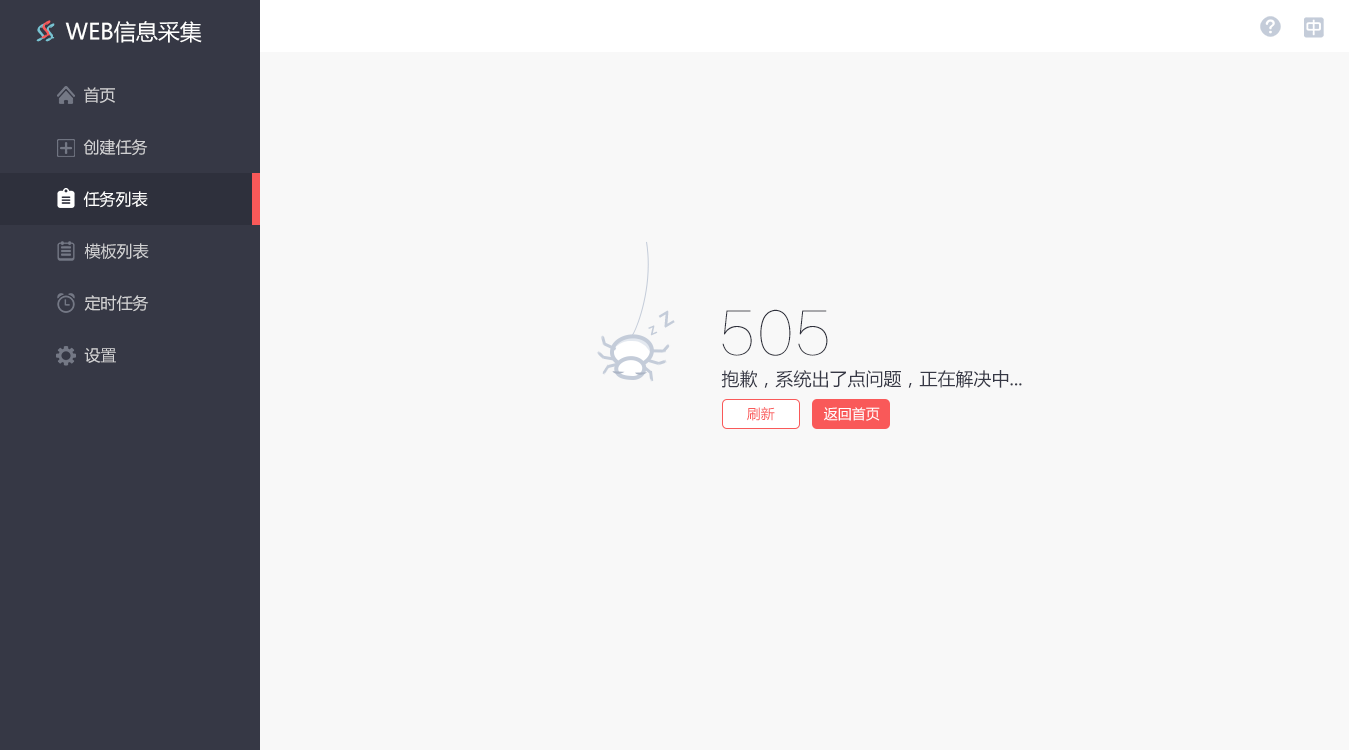
<style>
.page{position:relative;width:1349px;height:750px;background:#f8f8f8}
.page>*{position:absolute;margin:0}
.t1{font:24px "Mistral";color:#78c3d2}
.t2{font:24px "Mistral";color:#f95959}
.t3{font:22px "MicrosoftYaHei";color:#ffffff}
.t4{font:16px "MicrosoftYaHei";color:#d1d1d3}
.t5{font:16px "MicrosoftYaHei";color:#ffffff}
.t6{font:18px "MicrosoftYaHei-Bold";color:#c4ccd9}
.t7{font:60px "FZLTCXHJW--GB1-0";color:#2e303c}
.t8{font:11px "MicrosoftYaHei-Bold";color:#c4ccd9}
.t9{font:18px "MicrosoftYaHei";color:#363845}
.t10{font:14px "MicrosoftYaHei";color:#f95959}
.t11{font:14px "MicrosoftYaHei";color:#ffffff}
</style>
<div class="page">
<p class="t1" style="left:36px;top:23px;width:10px;height:19px">S</p>
<p class="t2" style="left:41px;top:20px;width:10px;height:19px">S</p>
<p class="t1" style="left:45px;top:23px;width:10px;height:19px">S</p>
<p class="t3" style="left:65px;top:21px;width:137px;height:22px">WEB信息采集</p>
<p class="t4" style="left:84px;top:87px;width:31px;height:16px">首页</p>
<p class="t4" style="left:84px;top:87px;width:31px;height:16px">首页</p>
<p class="t4" style="left:83px;top:139px;width:65px;height:17px">创建任务</p>
<p class="t4" style="left:83px;top:139px;width:65px;height:17px">创建任务</p>
<p class="t5" style="left:83px;top:191px;width:65px;height:17px">任务列表</p>
<p class="t5" style="left:83px;top:191px;width:65px;height:17px">任务列表</p>
<p class="t4" style="left:84px;top:243px;width:65px;height:16px">模板列表</p>
<p class="t4" style="left:84px;top:243px;width:65px;height:16px">模板列表</p>
<p class="t4" style="left:84px;top:295px;width:65px;height:17px">定时任务</p>
<p class="t4" style="left:84px;top:295px;width:65px;height:17px">定时任务</p>
<p class="t6" style="left:658px;top:310px;width:17px;height:18px;rotate:-31deg">Z</p>
<p class="t7" style="left:722px;top:309px;width:106px;height:47px">505</p>
<p class="t8" style="left:648px;top:325px;width:10px;height:11px;rotate:-23deg">Z</p>
<p class="t4" style="left:84px;top:348px;width:32px;height:15px">设置</p>
<p class="t4" style="left:84px;top:348px;width:32px;height:15px">设置</p>
<p class="t9" style="left:721px;top:370px;width:301px;height:18px">抱歉，系统出了点问题，正在解决中...</p>
<p class="t10" style="left:747px;top:407px;width:28px;height:14px">刷新</p>
<p class="t11" style="left:824px;top:407px;width:56px;height:14px">返回首页</p>
</div>
